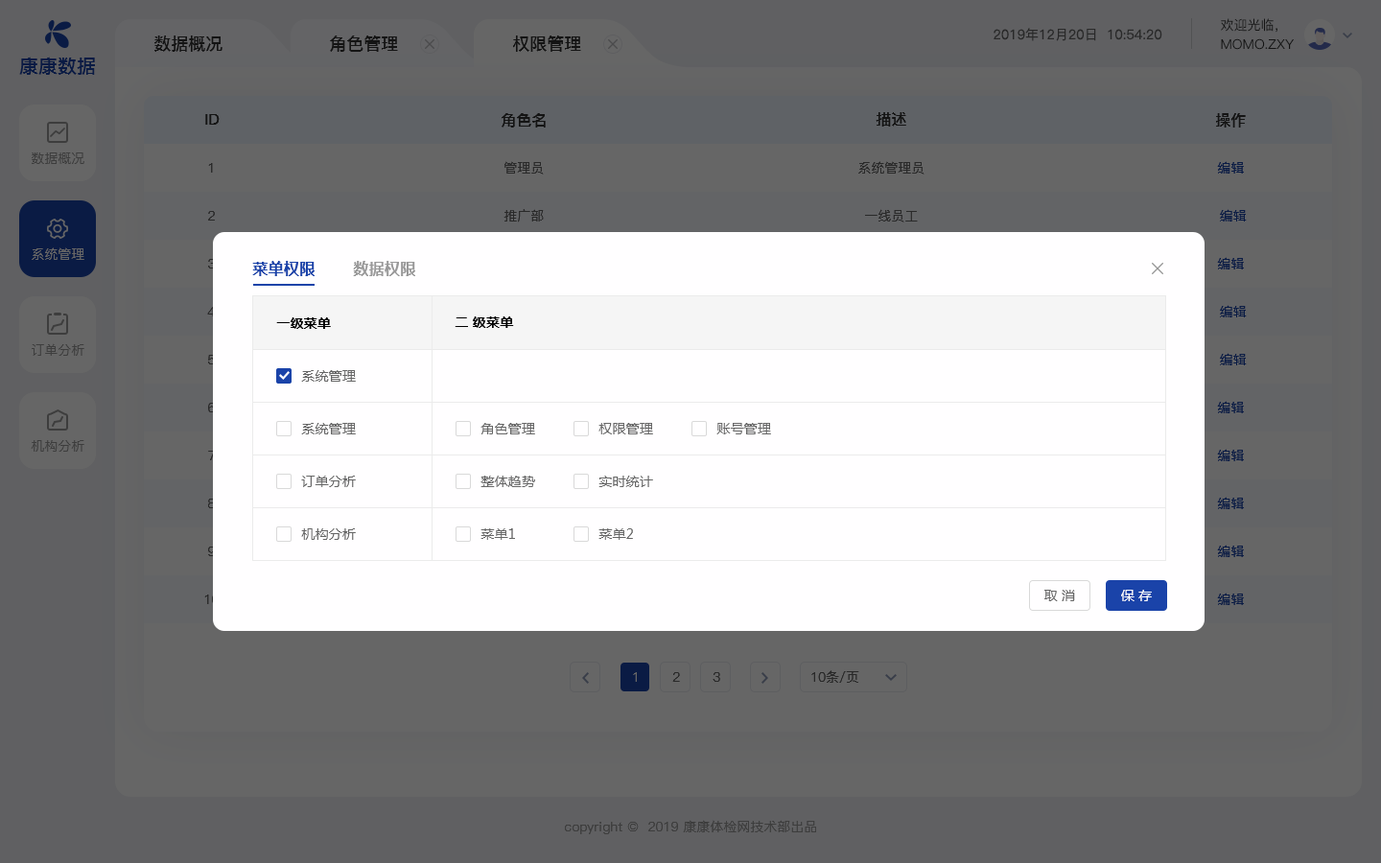
<style>
.page{position:relative;width:1381px;height:863px;background:#fffeff}
.page>*{position:absolute;margin:0}
.t1{font:13.4px "PingFang-SC-Regular";color:#292929}
.t2{font:13.4px "PingFang-SC-Medium";color:#141414;text-transform:uppercase}
.t3{font:17.3px "PingFang-SC-Bold";color:#141414;text-transform:uppercase}
.t4{font:19.2px "PingFangSC-Medium";color:#0a1b44;text-transform:uppercase}
.t5{font:15.3px "PingFang-SC-Bold";color:#141414;text-transform:uppercase}
.t6{font:13.4px "PingFang-SC-Medium";color:#3d3d3d;text-transform:uppercase}
.t7{font:13.4px "PingFang-SC-Medium";color:#292929;text-transform:uppercase}
.t8{font:13.4px "PingFang-SC-Medium";color:#0a1b44;text-transform:uppercase}
.t9{font:13.4px "PingFang-SC-Medium";color:#666666;text-transform:uppercase}
.t10{font:15.3px "MicrosoftYaHei-Bold";letter-spacing:0.02em;color:#1a43a9}
.t11{font:15.3px "MicrosoftYaHei-Bold";letter-spacing:0.02em;color:#999999}
.t12{font:13.4px "MicrosoftYaHei-Bold";letter-spacing:0.02em;color:#000000}
.t13{font:13.4px "MicrosoftYaHei";letter-spacing:0.02em;color:#666666}
.t14{font:13.4px "MicrosoftYaHei";letter-spacing:0.02em;color:#ffffff}
.t15{font:13.4px "PingFang-SC-Medium";color:#3d3d3d}
</style>
<div class="page">
<p class="t1" style="left:994px;top:28px;width:169px;height:13px">2019年12月20日  10:54:20</p>
<p class="t2" style="left:1221px;top:18px;width:57px;height:15px">欢迎光临，</p>
<p class="t3" style="left:154px;top:35px;width:69px;height:17px">数据概况</p>
<p class="t3" style="left:330px;top:35px;width:68px;height:17px">角色管理</p>
<p class="t3" style="left:513px;top:35px;width:68px;height:17px">权限管理</p>
<p class="t2" style="left:1221px;top:38px;width:73px;height:12px">momo.zxy</p>
<p class="t4" style="left:19px;top:57px;width:76px;height:18px">康康数据</p>
<p class="t5" style="left:502px;top:113px;width:44px;height:15px">角色名</p>
<p class="t5" style="left:876px;top:112px;width:30px;height:15px">描述</p>
<p class="t5" style="left:1216px;top:113px;width:30px;height:15px">操作</p>
<p class="t5" style="left:205px;top:114px;width:15px;height:11px">ID</p>
<p class="t6" style="left:32px;top:153px;width:52px;height:11px">数据概况</p>
<p class="t7" style="left:505px;top:161px;width:39px;height:14px">管理员</p>
<p class="t7" style="left:858px;top:161px;width:67px;height:14px">系统管理员</p>
<p class="t8" style="left:1217px;top:161px;width:27px;height:13px">编辑</p>
<p class="t7" style="left:208px;top:163px;width:5px;height:10px">1</p>
<p class="t7" style="left:504px;top:209px;width:40px;height:14px">推广部</p>
<p class="t7" style="left:865px;top:209px;width:53px;height:14px">一线员工</p>
<p class="t8" style="left:1220px;top:209px;width:27px;height:13px">编辑</p>
<p class="t7" style="left:208px;top:211px;width:7px;height:10px">2</p>
<p class="t9" style="left:32px;top:247px;width:52px;height:13px">系统管理</p>
<p class="t8" style="left:1217px;top:257px;width:27px;height:13px">编辑</p>
<p class="t10" style="left:252px;top:261px;width:63px;height:15px">菜单权限</p>
<p class="t11" style="left:353px;top:261px;width:62px;height:15px">数据权限</p>
<p class="t8" style="left:1220px;top:305px;width:27px;height:12px">编辑</p>
<p class="t12" style="left:276px;top:317px;width:55px;height:12px">一级菜单</p>
<p class="t12" style="left:455px;top:317px;width:59px;height:11px">二 级菜单</p>
<p class="t6" style="left:32px;top:343px;width:52px;height:13px">订单分析</p>
<p class="t8" style="left:1220px;top:353px;width:27px;height:12px">编辑</p>
<p class="t13" style="left:301px;top:370px;width:55px;height:12px">系统管理</p>
<p class="t8" style="left:1217px;top:401px;width:27px;height:12px">编辑</p>
<p class="t13" style="left:301px;top:423px;width:55px;height:12px">系统管理</p>
<p class="t13" style="left:481px;top:423px;width:54px;height:12px">角色管理</p>
<p class="t13" style="left:599px;top:423px;width:54px;height:12px">权限管理</p>
<p class="t13" style="left:717px;top:423px;width:54px;height:12px">账号管理</p>
<p class="t6" style="left:31px;top:440px;width:53px;height:12px">机构分析</p>
<p class="t8" style="left:1217px;top:449px;width:27px;height:12px">编辑</p>
<p class="t13" style="left:301px;top:476px;width:55px;height:11px">订单分析</p>
<p class="t13" style="left:481px;top:476px;width:54px;height:11px">整体趋势</p>
<p class="t13" style="left:599px;top:476px;width:54px;height:11px">实时统计</p>
<p class="t8" style="left:1217px;top:497px;width:27px;height:12px">编辑</p>
<p class="t13" style="left:301px;top:529px;width:55px;height:11px">机构分析</p>
<p class="t13" style="left:481px;top:529px;width:34px;height:11px">菜单1</p>
<p class="t13" style="left:599px;top:529px;width:34px;height:11px">菜单2</p>
<p class="t8" style="left:1217px;top:545px;width:27px;height:12px">编辑</p>
<p class="t13" style="left:1045px;top:590px;width:30px;height:11px">取 消</p>
<p class="t14" style="left:1121px;top:590px;width:31px;height:11px">保 存</p>
<p class="t8" style="left:1217px;top:593px;width:27px;height:12px">编辑</p>
<p class="t9" style="left:633px;top:672px;width:4px;height:10px">1</p>
<p class="t7" style="left:672px;top:672px;width:8px;height:10px">2</p>
<p class="t7" style="left:713px;top:672px;width:7px;height:10px">3</p>
<p class="t7" style="left:811px;top:670px;width:48px;height:13px">10条/页</p>
<p class="t15" style="left:565px;top:820px;width:251px;height:15px">copyright ©  2019 康康体检网技术部出品</p>
</div>
